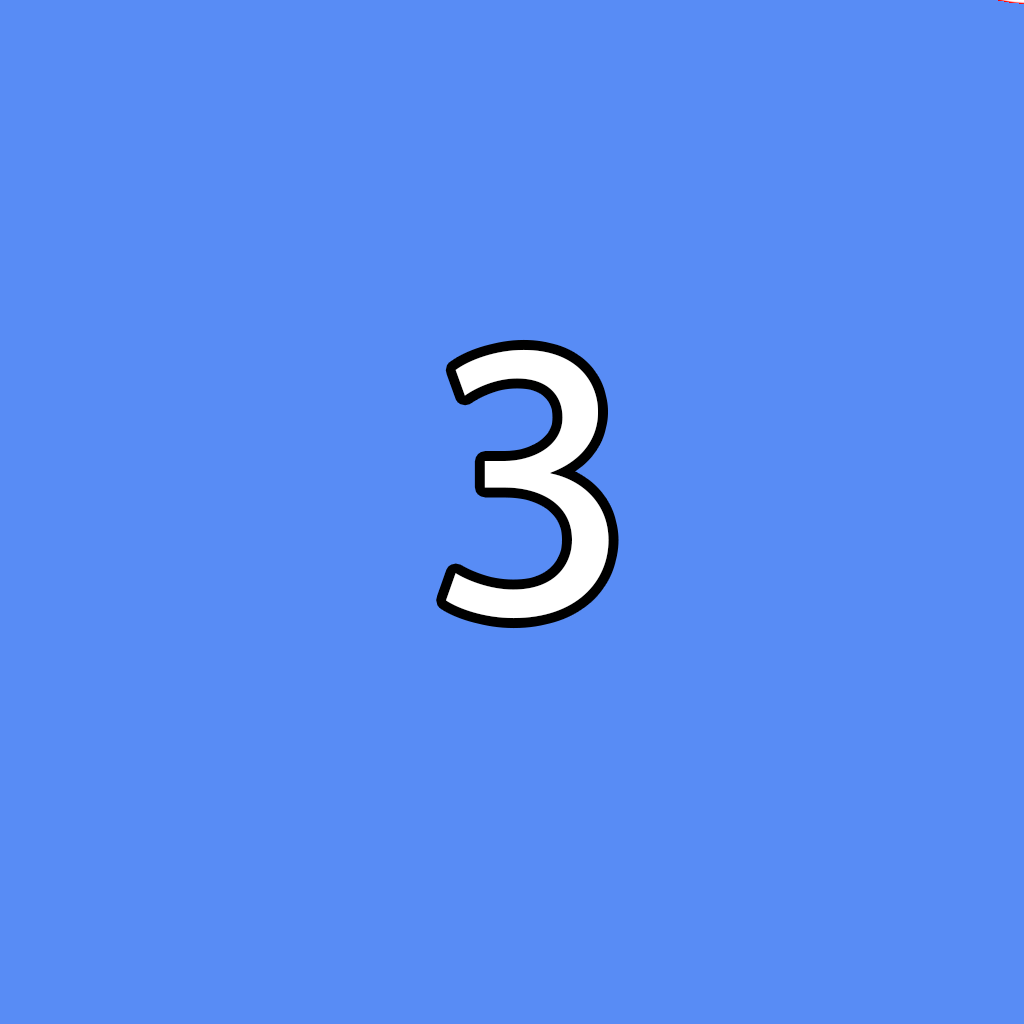
<style>
.page{position:relative;width:1024px;height:1024px;background:#588cf5}
.page>*{position:absolute;margin:0}
.t1{font:400px "MyriadPro-Regular";color:#ffffff}
</style>
<div class="page">
<p class="t1" style="left:446px;top:349px;width:163px;height:270px">3</p>
</div>
